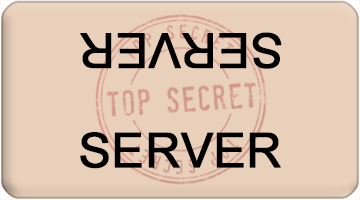
<style>
.page{position:relative;width:360px;height:200px;background:#e8d0bb}
.page>*{position:absolute;margin:0}
.t1{font:48px "ArialMT";color:#000000;font-weight:bold}
</style>
<div class="page">
<p class="t1" style="left:80px;top:32px;width:202px;height:37px;rotate:180deg">SERVER</p>
<p class="t1" style="left:80px;top:132px;width:201px;height:37px">SERVER</p>
</div>
